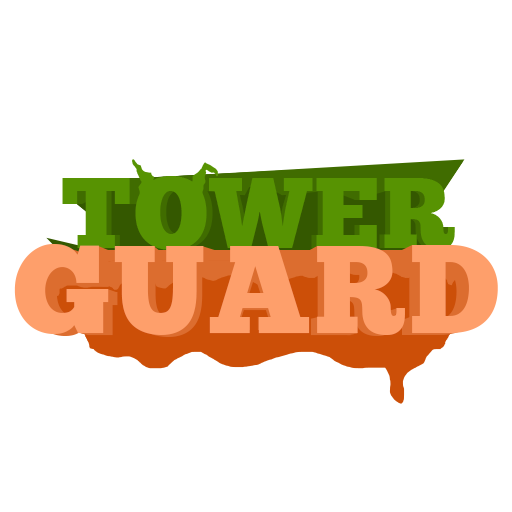
<style>
.page{position:relative;width:512px;height:512px;background:#ffffff}
.page>*{position:absolute;margin:0}
.t1{font:100px "ChunkFiveEx";letter-spacing:0.025em;color:#579302}
.t2{font:67px "ChunkFiveEx";letter-spacing:0.025em;color:#579302;scale:1.29 1}
.t3{font:125px "ChunkFiveEx";letter-spacing:0.025em;color:#fe9f6b}
.t4{font:121.2px "ChunkFiveEx";letter-spacing:0.025em;color:#fe9f6b}
.t5{font:101.7px "ChunkFiveEx";letter-spacing:0.025em;color:#fe9f6b;scale:1.07 1}
</style>
<div class="page">
<p class="t1" style="left:67px;top:178px;width:68px;height:70px">T</p>
<p class="t1" style="left:141px;top:176px;width:72px;height:74px">O</p>
<p class="t1" style="left:311px;top:178px;width:61px;height:70px">E</p>
<p class="t1" style="left:379px;top:178px;width:71px;height:71px">R</p>
<p class="t2" style="left:216px;top:186px;width:91px;height:47px">W</p>
<p class="t3" style="left:14px;top:244px;width:484px;height:91px">GUARD</p>
<p class="t4" style="left:123px;top:250px;width:86px;height:87px">U</p>
<p class="t4" style="left:310px;top:250px;width:86px;height:86px">R</p>
<p class="t5" style="left:215px;top:259px;width:87px;height:71px">A</p>
</div>
